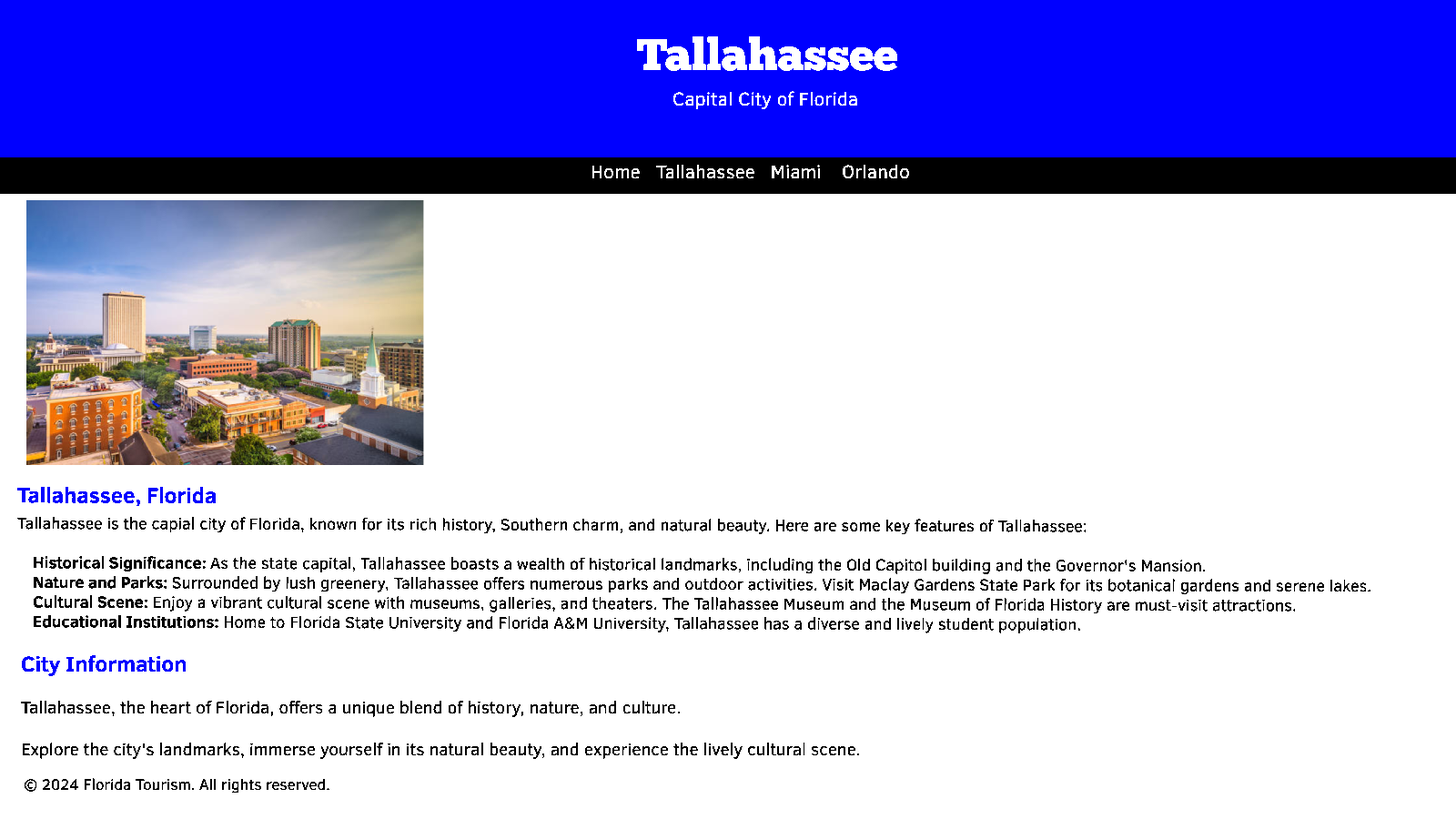
<style>
.page{position:relative;width:1456px;height:819px;background:#ffffff}
.page>*{position:absolute;margin:0}
.t1{font:44.6px "ChunkFive-Regular";color:#ffffff}
.t2{font:19.1px "ClearSans";color:#ffffff}
.t3{font:16.4px "ClearSans";color:#000000}
.t4{font:15.5px "ClearSans";color:#000000}
.t5{font:21.8px "ClearSans-Bold";color:#0000ff}
.t6{font:16.4px "ClearSans-Bold";color:#000000}
.t7{font:17.3px "ClearSans";color:#000000}
</style>
<div class="page">
<p class="t1" style="left:637px;top:36px;width:261px;height:35px">Tallahassee</p>
<p class="t2" style="left:673px;top:91px;width:184px;height:19px">Capital City of Florida</p>
<p class="t2" style="left:591px;top:164px;width:318px;height:15px">Home   Tallahassee   Miami    Orlando</p>
<p class="t3" style="left:17px;top:486px;width:1353px;height:147px"><span class="t4">    </span><span class="t5">Tallahassee, Florida<br>    </span>Tallahassee is the capial city of Florida, known for its rich history, Southern charm, and natural beauty. Here are some key features of Tallahassee:<br><br> <span class="t6">Historical Significance: </span>As the state capital, Tallahassee boasts a wealth of historical landmarks, including the Old Capitol building and the Governor's Mansion.<br> <span class="t6">Nature and Parks: </span>Surrounded by lush greenery, Tallahassee offers numerous parks and outdoor activities. Visit Maclay Gardens State Park for its botanical gardens and serene lakes.<br> <span class="t6">Cultural Scene:</span> Enjoy a vibrant cultural scene with museums, galleries, and theaters. The Tallahassee Museum and the Museum of Florida History are must-visit attractions.<br> <span class="t6">Educational Institutions:</span> Home to Florida State University and Florida A&amp;M University, Tallahassee has a diverse and lively student population.</p>
<p class="t7" style="left:21px;top:655px;width:839px;height:104px"><span class="t5">City Information<br><br></span>Tallahassee, the heart of Florida, offers a unique blend of history, nature, and culture.<br><br>Explore the city's landmarks, immerse yourself in its natural beauty, and experience the lively cultural scene.</p>
<p class="t4" style="left:25px;top:778px;width:304px;height:16px">© 2024 Florida Tourism. All rights reserved.</p>
</div>
